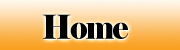
<style>
.page{position:relative;width:180px;height:50px}
.page>*{position:absolute;margin:0}
.t1{font:33px "Elephant-Regular";letter-spacing:-0.05em;color:#000000;scale:0.91 1}
</style>
<div class="page">
<p class="t1" style="left:42px;top:14px;width:86px;height:25px">Home</p>
<p class="t1" style="left:43px;top:15px;width:86px;height:25px">Home</p>
</div>
